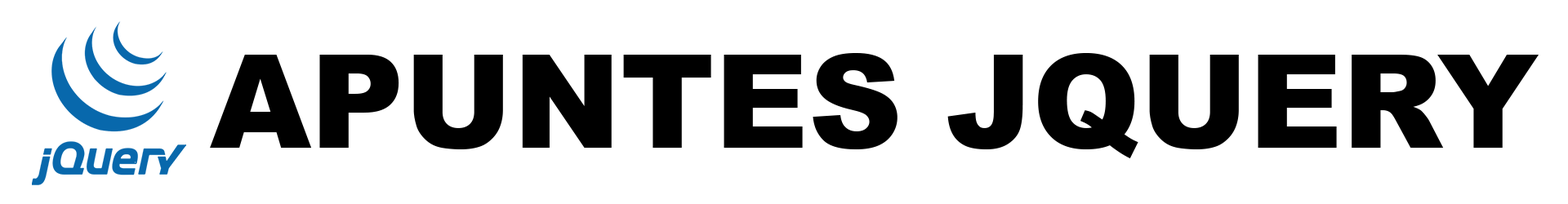
<style>
.page{position:relative;width:1568px;height:204px;background:#ffffff}
.page>*{position:absolute;margin:0}
.t1{font:129.8px "Arial-Black";color:#000000}
</style>
<div class="page">
<p class="t1" style="left:210px;top:53px;width:1329px;height:105px">APUNTES JQUERY</p>
</div>
